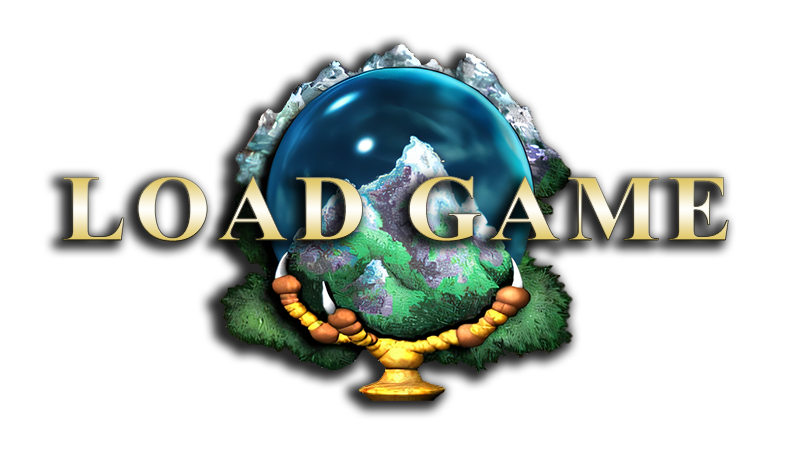
<style>
.page{position:relative;width:800px;height:472px;background:#ffffff}
.page>*{position:absolute;margin:0}
.t1{font:94px "TimesNewRomanPS-BoldMT";letter-spacing:0.07em;scale:1.05 1}
</style>
<div class="page">
<p class="t1" style="left:63px;top:176px;width:666px;height:66px">LOAD GAME</p>
</div>
